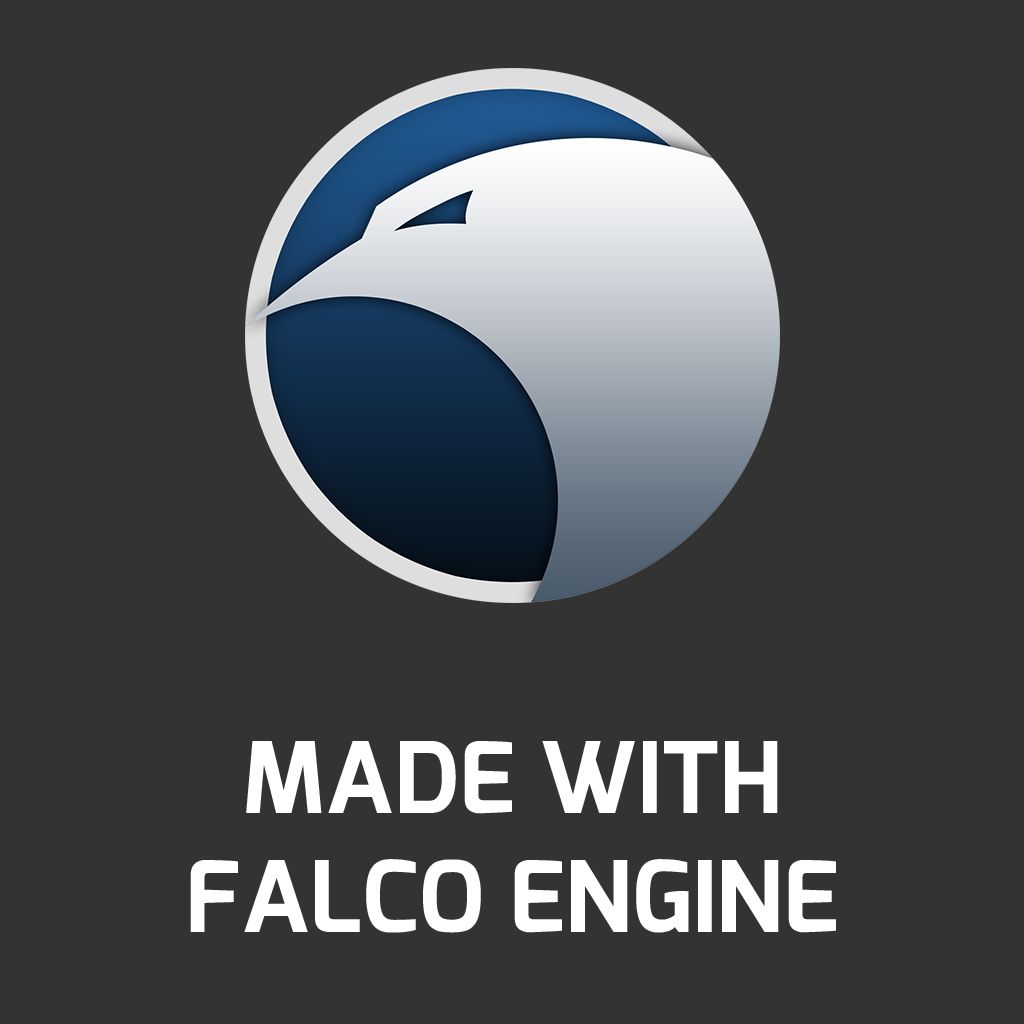
<style>
.page{position:relative;width:1024px;height:1024px;background:#333333}
.page>*{position:absolute;margin:0}
.t1{font:98.4px "Exo-Bold";color:#ffffff;text-transform:uppercase}
</style>
<div class="page">
<p class="t1" style="left:190px;top:741px;width:646px;height:192px;text-align:center">MADE WITH<br>FALCO ENGINE</p>
</div>
